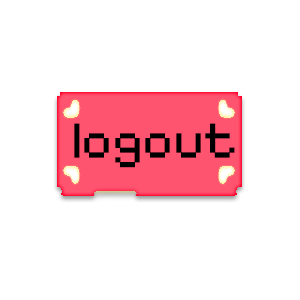
<style>
.page{position:relative;width:300px;height:300px;background:#ffffff}
.page>*{position:absolute;margin:0}
.t1{font:52.9px "PixelifySans-Regular";color:#000000}
</style>
<div class="page">
<p class="t1" style="left:74px;top:123px;width:161px;height:45px">logout</p>
</div>
